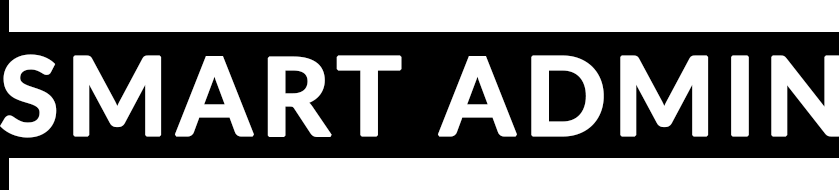
<style>
.page{position:relative;width:839px;height:190px;background:#ffffff}
.page>*{position:absolute;margin:0}
.t1{font:108.3px "Lato-Bold";letter-spacing:0.05em;color:#ffffff;text-transform:uppercase;font-weight:bold}
</style>
<div class="page">
<p class="t1" style="left:0px;top:54px;width:841px;height:84px">smart admin</p>
</div>
